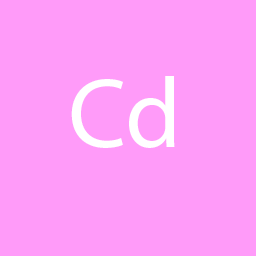
<style>
.page{position:relative;width:256px;height:256px;background:#ff9bf9}
.page>*{position:absolute;margin:0}
.t1{font:100px "MyriadPro-Regular";color:#ffffff}
</style>
<div class="page">
<p class="t1" style="left:71px;top:76px;width:104px;height:72px">Cd</p>
</div>
